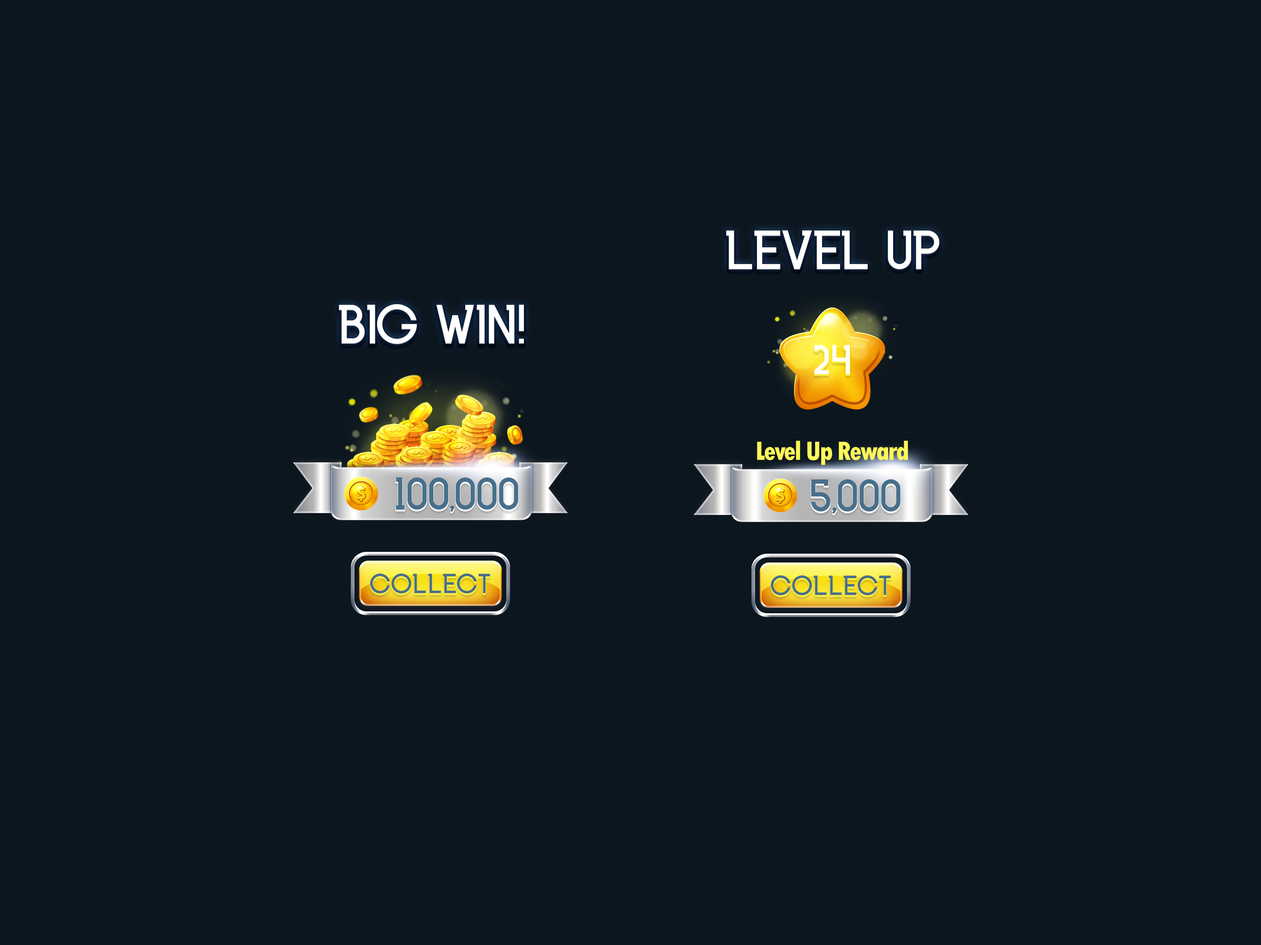
<style>
.page{position:relative;width:1261px;height:945px;background:#0c161f}
.page>*{position:absolute;margin:0}
.t1{font:55.4px "INKFERNO";letter-spacing:-0.025em;color:#ffffff;text-transform:uppercase}
.t2{font:41.5px "INKFERNO";color:#ffffff;text-transform:uppercase}
.t3{font:27.7px "TwCenMT-CondensedExtraBold";letter-spacing:-0.05em;color:#fef859}
.t4{font:46.2px "INKFERNO";color:#476f8b;text-transform:uppercase}
.t5{font:27.7px "INKFERNO";color:#476f8b;text-transform:uppercase}
</style>
<div class="page">
<p class="t1" style="left:726px;top:230px;width:213px;height:40px">Level up</p>
<p class="t1" style="left:339px;top:304px;width:185px;height:40px">big Win!</p>
<p class="t2" style="left:814px;top:345px;width:36px;height:29px">24</p>
<p class="t3" style="left:757px;top:441px;width:151px;height:24px">Level Up Reward</p>
<p class="t4" style="left:396px;top:477px;width:122px;height:35px">100,000</p>
<p class="t4" style="left:811px;top:479px;width:90px;height:35px">5,000</p>
<p class="t5" style="left:370px;top:574px;width:120px;height:20px">collect</p>
<p class="t5" style="left:771px;top:576px;width:120px;height:20px">collect</p>
</div>
